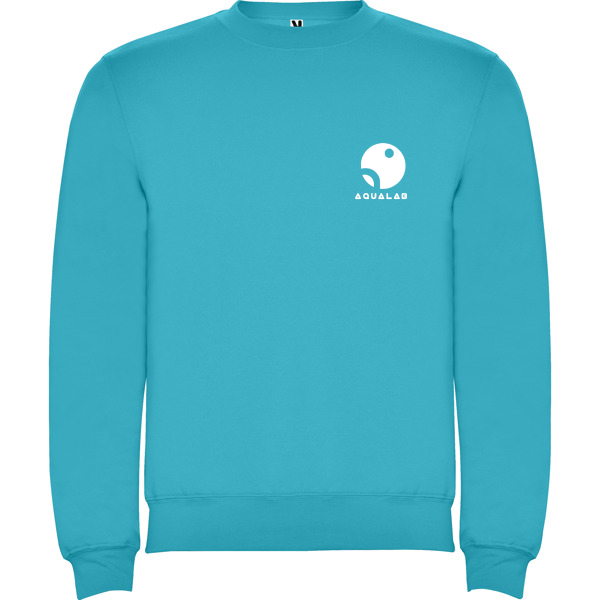
<style>
.page{position:relative;width:600px;height:600px;background:#ffffff}
.page>*{position:absolute;margin:0}
.t1{font:7.5px "Virgo01";letter-spacing:0.2em;color:#ffffff}
</style>
<div class="page">
<p class="t1" style="left:355px;top:193px;width:52px;height:7px">AquaLab</p>
</div>
